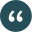
<style>
.page{position:relative;width:32px;height:34px;background:#264e59}
.page>*{position:absolute;margin:0}
.t1{font:50px "ProximaNova-Regular";color:#ffffff}
</style>
<div class="page">
<p class="t1" style="left:8px;top:10px;width:15px;height:12px">“</p>
</div>
